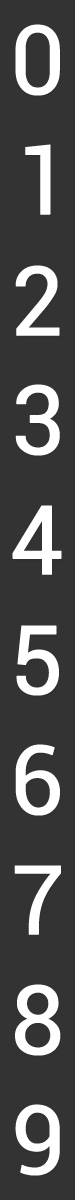
<style>
.page{position:relative;width:75px;height:1200px;background:#333333}
.page>*{position:absolute;margin:0}
.t1{font:96px "Roboto-Regular";letter-spacing:-0.02em;color:#ffffff;font-weight:bold}
</style>
<div class="page">
<p class="t1" style="left:15px;top:24px;width:45px;height:72px">0</p>
<p class="t1" style="left:25px;top:144px;width:26px;height:71px">1</p>
<p class="t1" style="left:15px;top:265px;width:45px;height:71px">2</p>
<p class="t1" style="left:15px;top:384px;width:45px;height:72px">3</p>
<p class="t1" style="left:12px;top:505px;width:50px;height:70px">4</p>
<p class="t1" style="left:16px;top:625px;width:43px;height:71px">5</p>
<p class="t1" style="left:15px;top:744px;width:45px;height:72px">6</p>
<p class="t1" style="left:14px;top:865px;width:47px;height:70px">7</p>
<p class="t1" style="left:15px;top:984px;width:46px;height:72px">8</p>
<p class="t1" style="left:15px;top:1104px;width:45px;height:72px">9</p>
</div>
